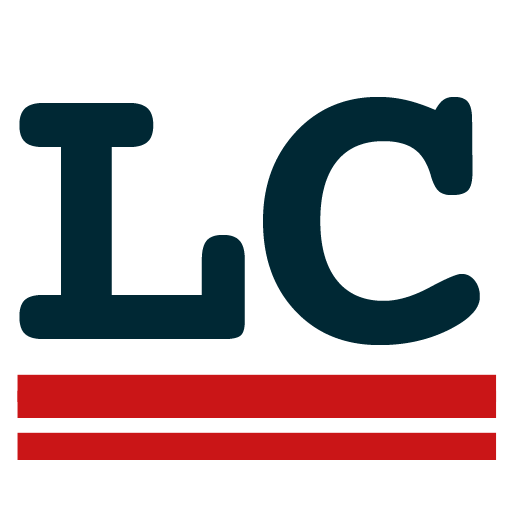
<style>
.page{position:relative;width:512px;height:512px;background:#ffffff}
.page>*{position:absolute;margin:0}
.t1{font:407px "Courier-Bold";letter-spacing:-0.01em;color:#002834}
</style>
<div class="page">
<p class="t1" style="left:19px;top:97px;width:461px;height:248px">LC</p>
</div>
